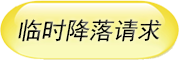
<style>
.page{position:relative;width:179px;height:60px}
.page>*{position:absolute;margin:0}
.t1{font:24px "SimHei";color:#000000;font-style:italic}
</style>
<div class="page">
<p class="t1" style="left:18px;top:19px;width:144px;height:23px">临时降落请求</p>
</div>
